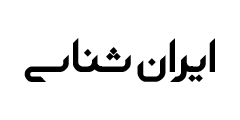
<style>
.page{position:relative;width:240px;height:120px;background:#ffffff}
.page>*{position:absolute;margin:0}
.t1{font:60px "gaseman";color:#000000}
</style>
<div class="page">
<p class="t1" style="left:24px;top:38px;width:191px;height:44px">ایران شناسی</p>
</div>
